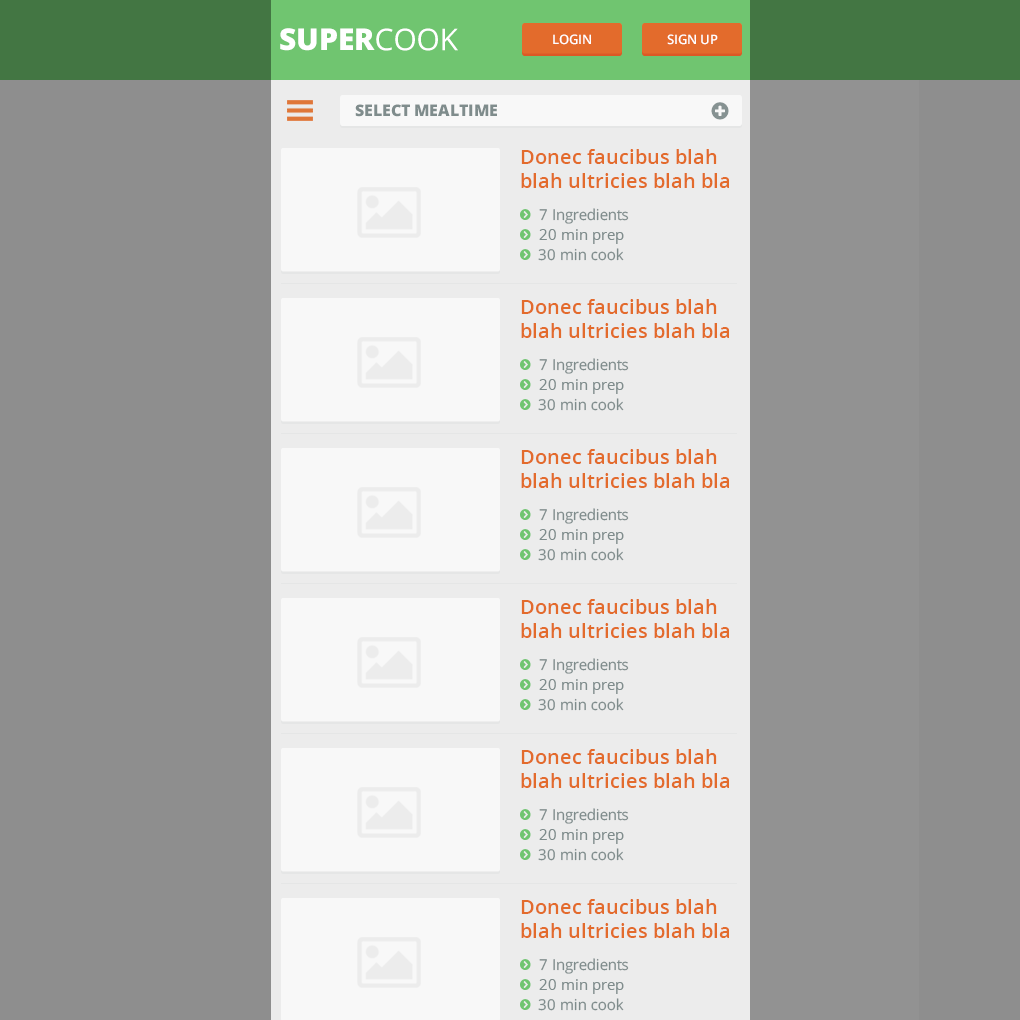
<style>
.page{position:relative;width:1020px;height:1020px;background:#8e8e8e}
.page>*{position:absolute;margin:0}
.t1{font:30px "OpenSans-Extrabold";color:#ffffff}
.t2{font:30px "OpenSans";color:#ffffff}
.t3{font:13px "OpenSans-Semibold";color:#ffffff}
.t4{font:16px "OpenSans-Extrabold";color:#7f8c8c}
.t5{font:20px/24px "OpenSans-Semibold";color:#e36b2c}
.t6{font:15px "OpenSans";color:#7f8c8c}
.t7{font:15.1px "OpenSans";color:#7f8c8c}
</style>
<div class="page">
<p class="t1" style="left:280px;top:28px;width:95px;height:23px">SUPER</p>
<p class="t2" style="left:376px;top:28px;width:82px;height:23px">COOK</p>
<p class="t3" style="left:553px;top:34px;width:38px;height:11px">LOGIN</p>
<p class="t3" style="left:667px;top:34px;width:51px;height:11px">SIGN UP</p>
<p class="t4" style="left:355px;top:104px;width:142px;height:13px">SELECT MEALTIME</p>
<p class="t5" style="left:521px;top:149px;width:208px;height:39px">Donec faucibus blah blah ultricies blah bla congue blah...</p>
<p class="t6" style="left:539px;top:208px;width:90px;height:16px">7 Ingredients</p>
<p class="t6" style="left:539px;top:229px;width:85px;height:15px">20 min prep</p>
<p class="t7" style="left:538px;top:248px;width:86px;height:13px">30 min cook</p>
<p class="t5" style="left:521px;top:299px;width:208px;height:39px">Donec faucibus blah blah ultricies blah bla congue blah...</p>
<p class="t6" style="left:539px;top:358px;width:90px;height:16px">7 Ingredients</p>
<p class="t6" style="left:539px;top:379px;width:85px;height:15px">20 min prep</p>
<p class="t7" style="left:538px;top:398px;width:86px;height:13px">30 min cook</p>
<p class="t5" style="left:521px;top:449px;width:208px;height:39px">Donec faucibus blah blah ultricies blah bla congue blah...</p>
<p class="t6" style="left:539px;top:508px;width:90px;height:16px">7 Ingredients</p>
<p class="t6" style="left:539px;top:529px;width:85px;height:15px">20 min prep</p>
<p class="t7" style="left:538px;top:548px;width:86px;height:13px">30 min cook</p>
<p class="t5" style="left:521px;top:599px;width:208px;height:39px">Donec faucibus blah blah ultricies blah bla congue blah...</p>
<p class="t6" style="left:539px;top:658px;width:90px;height:16px">7 Ingredients</p>
<p class="t6" style="left:539px;top:679px;width:85px;height:15px">20 min prep</p>
<p class="t7" style="left:538px;top:698px;width:86px;height:13px">30 min cook</p>
<p class="t5" style="left:521px;top:749px;width:208px;height:39px">Donec faucibus blah blah ultricies blah bla congue blah...</p>
<p class="t6" style="left:539px;top:808px;width:90px;height:16px">7 Ingredients</p>
<p class="t6" style="left:539px;top:829px;width:85px;height:15px">20 min prep</p>
<p class="t7" style="left:538px;top:848px;width:86px;height:13px">30 min cook</p>
<p class="t5" style="left:521px;top:899px;width:208px;height:39px">Donec faucibus blah blah ultricies blah bla congue blah...</p>
<p class="t6" style="left:539px;top:958px;width:90px;height:16px">7 Ingredients</p>
<p class="t6" style="left:539px;top:979px;width:85px;height:15px">20 min prep</p>
<p class="t7" style="left:538px;top:998px;width:86px;height:13px">30 min cook</p>
</div>
